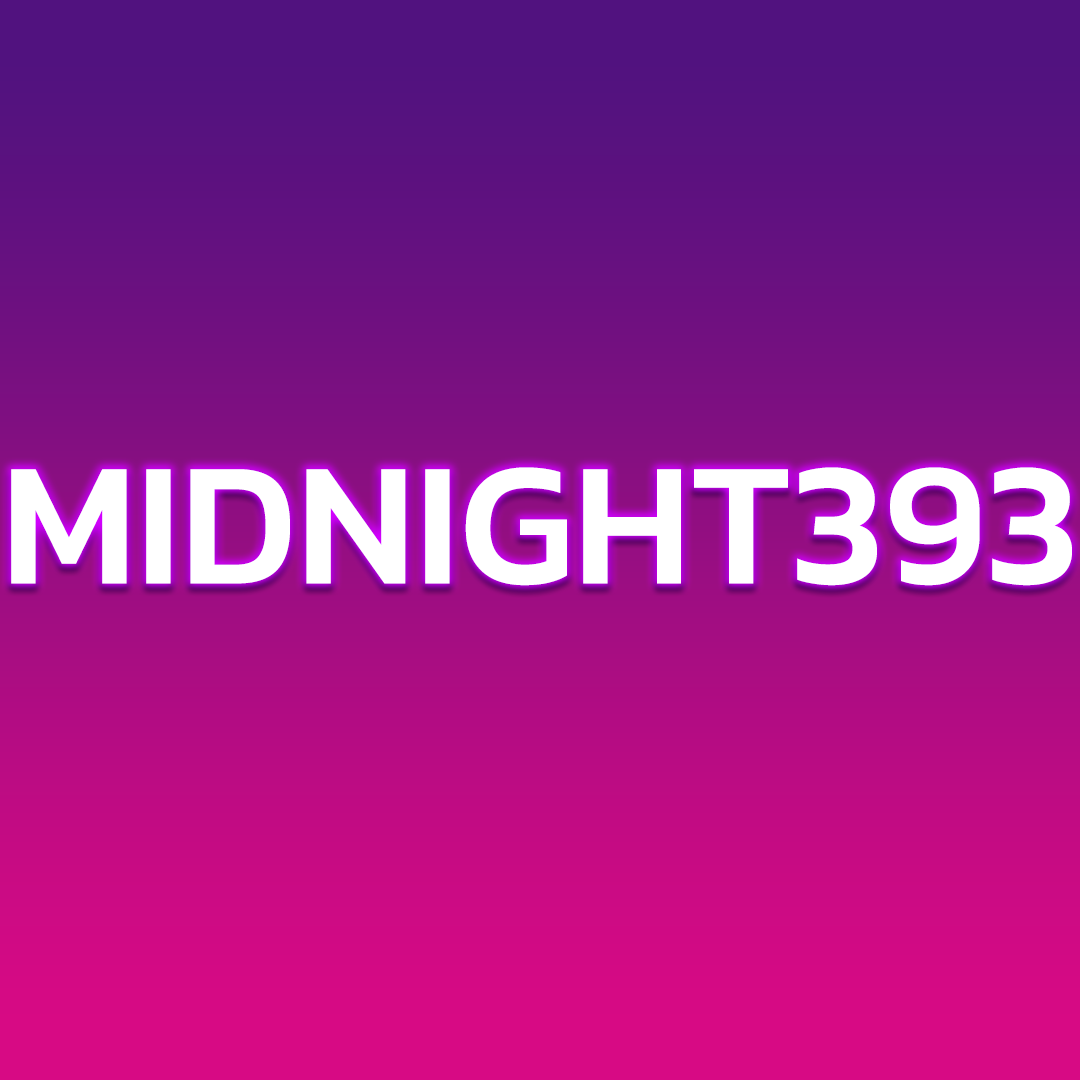
<style>
.page{position:relative;width:1080px;height:1080px}
.page>*{position:absolute;margin:0}
.t1{font:177px "Kanit-Medium";color:#ffffff}
</style>
<div class="page">
<p class="t1" style="left:11px;top:467px;width:1061px;height:119px">MIDNIGHT393</p>
</div>
